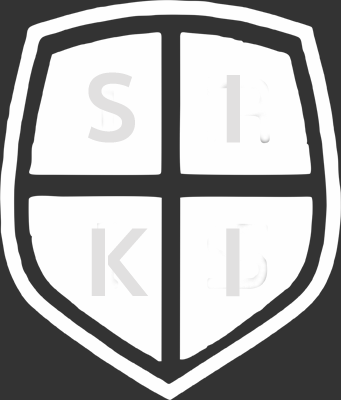
<style>
.page{position:relative;width:341px;height:400px;background:#fefefe}
.page>*{position:absolute;margin:0}
.t1{font:100px "SukhumvitSet-Bold";color:#e1e0e0}
</style>
<div class="page">
<p class="t1" style="left:88px;top:72px;width:47px;height:71px">S</p>
<p class="t1" style="left:226px;top:75px;width:14px;height:68px">I</p>
<p class="t1" style="left:91px;top:228px;width:57px;height:68px">K</p>
<p class="t1" style="left:226px;top:228px;width:14px;height:69px">I</p>
</div>
